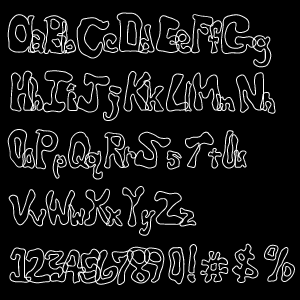
<style>
.page{position:relative;width:300px;height:300px;background:#000000}
.page>*{position:absolute;margin:0}
.t1{font:48px "CritterIsRad";letter-spacing:0.1em;color:#ffffff}
</style>
<div class="page">
<p class="t1" style="left:7px;top:12px;width:288px;height:273px">AaBbCcDdEeFfGg<br>HhIiJjKkLlMmNn<br>OoPpQqRrSsTtUu<br>VvWwXxYyZz<br>1234567890!#$%</p>
</div>
